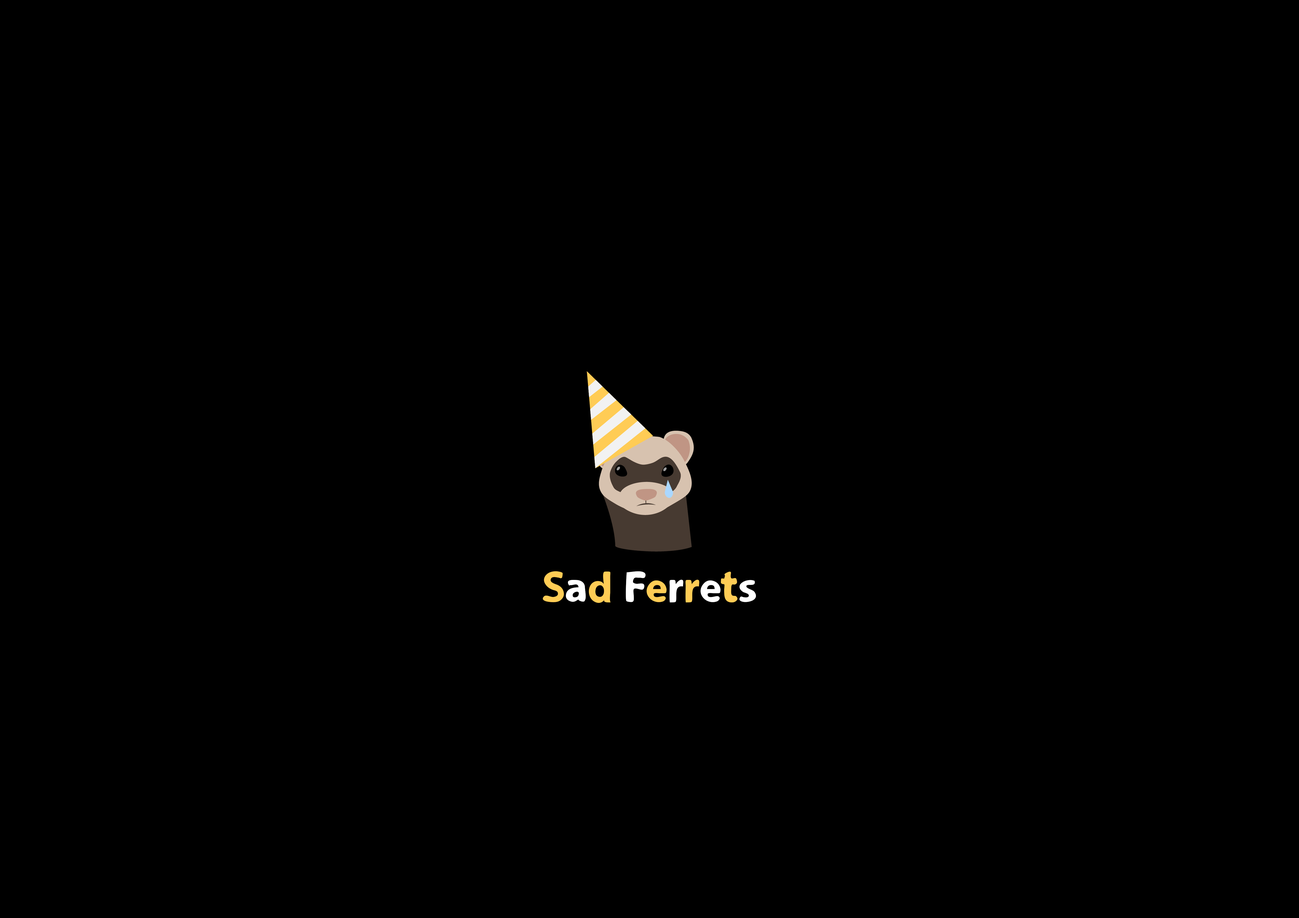
<style>
.page{position:relative;width:1299px;height:918px;background:#000000}
.page>*{position:absolute;margin:0}
.t1{font:43.6px "LooseySans";color:#ffcc55}
.t2{font:43.6px "LooseySans";color:#ffffff}
</style>
<div class="page">
<p class="t1" style="left:543px;top:571px;width:213px;height:32px">S<span class="t2">a</span>d<span class="t2"> F</span>e<span class="t2">r</span>r<span class="t2">e</span>t<span class="t2">s</span></p>
</div>
